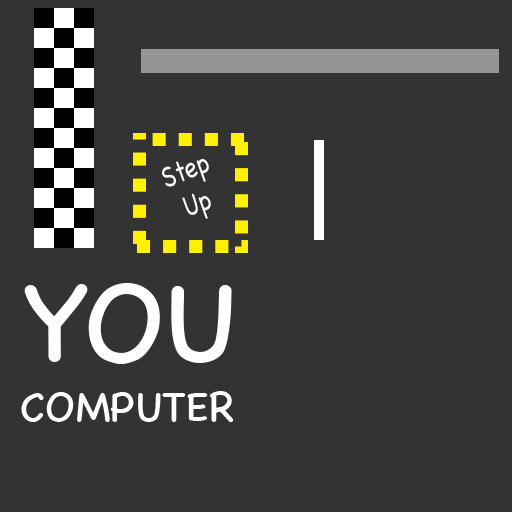
<style>
.page{position:relative;width:512px;height:512px;background:#333333}
.page>*{position:absolute;margin:0}
.t1{font:29.7px "Chalkboard";color:#fcfcf9;scale:0.81 1}
.t2{font:113px "ChalkboardSE-Regular";color:#ffffff}
.t3{font:42px "ChalkboardSE-Regular";color:#ffffff}
</style>
<div class="page">
<p class="t1" style="left:162px;top:159px;width:49px;height:60px;text-align:center;rotate:-20deg">Step<br>Up</p>
<p class="t2" style="left:24px;top:283px;width:208px;height:81px">YOU</p>
<p class="t3" style="left:21px;top:391px;width:213px;height:31px">COMPUTER</p>
</div>
